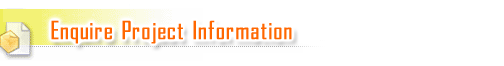
<style>
.page{position:relative;width:504px;height:66px;background:#ffffff}
.page>*{position:absolute;margin:0}
.t1{font:24px "AgencyFB-Reg";letter-spacing:0.1em;color:#ff6600;font-weight:bold}
</style>
<div class="page">
<p class="t1" style="left:51px;top:20px;width:241px;height:24px">Enquire Project Information</p>
</div>
